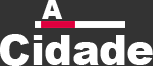
<style>
.page{position:relative;width:153px;height:66px;background:#333333}
.page>*{position:absolute;margin:0}
.t1{font:26.5px "Arial-Black";color:#ffffff}
.t2{font:42px "Arial-Black";color:#ffffff}
</style>
<div class="page">
<p class="t1" style="left:42px;top:0px;width:21px;height:19px">A</p>
<p class="t2" style="left:0px;top:34px;width:153px;height:32px">Cidade</p>
</div>
